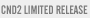
<style>
.page{position:relative;width:90px;height:18px;background:#efefef}
.page>*{position:absolute;margin:0}
.t1{font:12px "AlternateGothicNo2BT-Regular";color:#7b7b7b;text-transform:uppercase}
</style>
<div class="page">
<p class="t1" style="left:1px;top:5px;width:87px;height:9px">cnd2 limited release</p>
</div>
